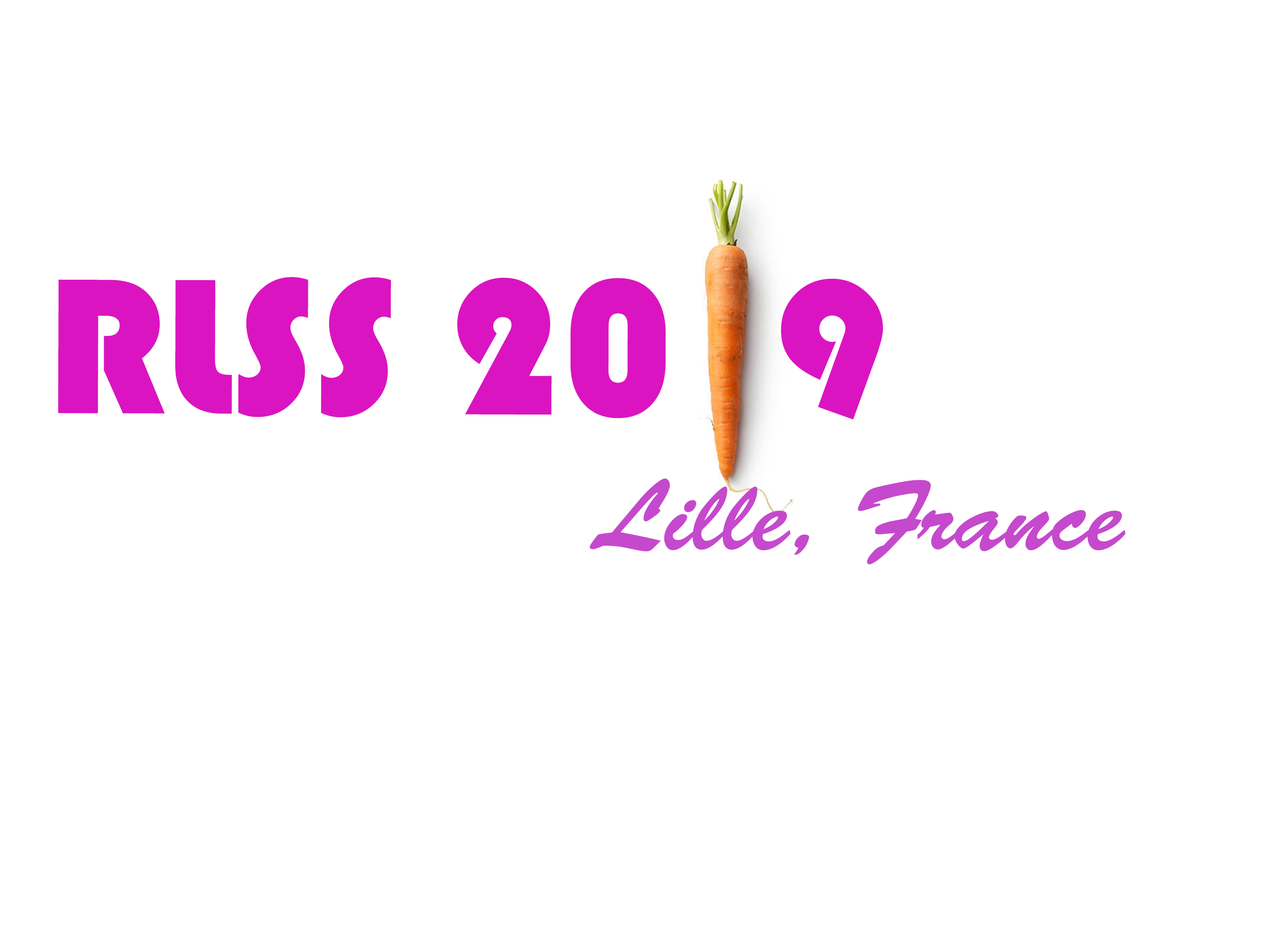
<style>
.page{position:relative;width:1261px;height:945px;background:#ffffff}
.page>*{position:absolute;margin:0}
.t1{font:200.2px "Bauhaus93";color:#db14c1}
.t2{font:100.1px "BrushScriptStd";color:#c549cc}
</style>
<div class="page">
<p class="t1" style="left:58px;top:277px;width:826px;height:143px">RLSS 20  9</p>
<p class="t2" style="left:590px;top:479px;width:536px;height:86px">Lille, France</p>
</div>
